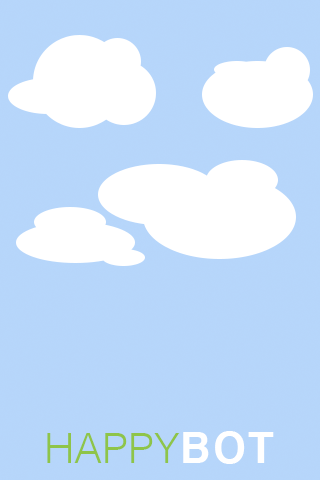
<style>
.page{position:relative;width:320px;height:480px;background:#b6d5fa}
.page>*{position:absolute;margin:0}
.t1{font:41.8px "Helvetica-Light";color:#8ec549}
.t2{font:41.8px "Helvetica-Bold";letter-spacing:0.06em;color:#ffffff}
</style>
<div class="page">
<p class="t1" style="left:47px;top:431px;width:227px;height:33px">HAPPY<span class="t2">BOT</span></p>
</div>
